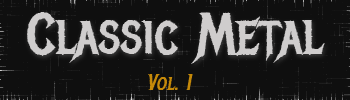
<style>
.page{position:relative;width:350px;height:100px;background:#0f0f0f}
.page>*{position:absolute;margin:0}
.t1{font:57.6px "MetalMania-Regular";color:#cfcdcd}
.t2{font:22.1px "MetalMania-Regular";color:#c58909;font-style:italic}
</style>
<div class="page">
<p class="t1" style="left:27px;top:12px;width:298px;height:52px">Classic Metal</p>
<p class="t2" style="left:148px;top:74px;width:45px;height:16px">Vol. 1</p>
</div>
